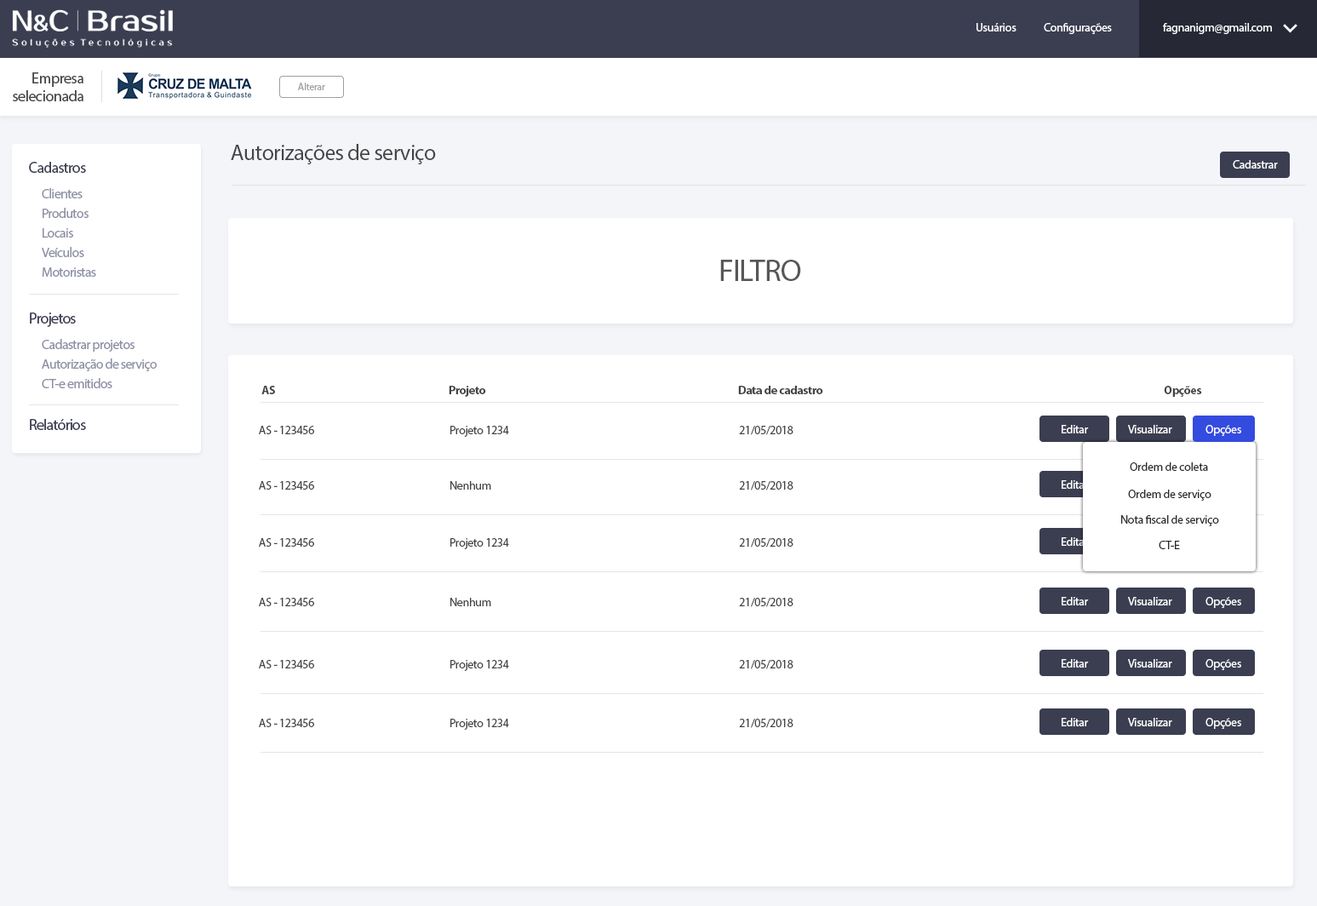
<style>
.page{position:relative;width:1317px;height:906px;background:#ffffff}
.page>*{position:absolute;margin:0}
.t1{font:11.9px "MyriadPro-Regular";letter-spacing:-0.025em;color:#ffffff}
.t2{font:15.3px/17.8px "MyriadPro-Regular";letter-spacing:-0.025em;color:#454545}
.t3{font:10.2px "MyriadPro-Regular";letter-spacing:-0.025em;color:#a2a2a2}
.t4{font:22.1px "MyriadPro-Regular";letter-spacing:-0.025em;color:#454545}
.t5{font:15.3px "MyriadPro-Regular";letter-spacing:-0.045em;color:#3b3e51}
.t6{font:13.6px "MyriadPro-Regular";letter-spacing:-0.045em;color:#8c8fa4}
.t7{font:30.6px "MyriadPro-Regular";letter-spacing:-0.025em;color:#575757}
.t8{font:13.6px "MyriadPro-Regular";letter-spacing:-0.045em;color:#8d90a5}
.t9{font:11.9px "MyriadPro-Bold";letter-spacing:-0.025em;color:#454545}
.t10{font:11.9px "MyriadPro-Regular";letter-spacing:-0.025em;color:#454545}
.t11{font:11.9px "MyriadPro-Regular";letter-spacing:-0.025em;color:#2a2a2a}
</style>
<div class="page">
<p class="t1" style="left:976px;top:23px;width:40px;height:8px">Usuários</p>
<p class="t1" style="left:1043px;top:23px;width:69px;height:11px">Configurações</p>
<p class="t1" style="left:1163px;top:23px;width:109px;height:11px">fagnanigm@gmail.com</p>
<p class="t2" style="left:13px;top:72px;width:70px;height:29px;text-align:right">Empresa<br>selecionada</p>
<p class="t3" style="left:298px;top:83px;width:27px;height:7px">Alterar</p>
<p class="t4" style="left:231px;top:144px;width:205px;height:20px">Autorizações de serviço</p>
<p class="t5" style="left:29px;top:162px;width:57px;height:11px">Cadastros</p>
<p class="t1" style="left:1232px;top:160px;width:46px;height:9px">Cadastrar</p>
<p class="t6" style="left:42px;top:188px;width:41px;height:10px">Clientes</p>
<p class="t6" style="left:43px;top:208px;width:46px;height:10px">Produtos</p>
<p class="t6" style="left:43px;top:228px;width:30px;height:9px">Locais</p>
<p class="t6" style="left:42px;top:247px;width:42px;height:10px">Veículos</p>
<p class="t6" style="left:42px;top:267px;width:54px;height:10px">Motoristas</p>
<p class="t7" style="left:720px;top:260px;width:81px;height:21px">FILTRO</p>
<p class="t5" style="left:30px;top:312px;width:46px;height:15px">Projetos</p>
<p class="t6" style="left:42px;top:339px;width:92px;height:13px">Cadastrar projetos</p>
<p class="t8" style="left:42px;top:358px;width:115px;height:13px">Autorização de serviço</p>
<p class="t6" style="left:42px;top:378px;width:70px;height:10px">CT-e emitidos</p>
<p class="t9" style="left:261px;top:386px;width:14px;height:8px">AS</p>
<p class="t9" style="left:449px;top:386px;width:37px;height:11px">Projeto</p>
<p class="t9" style="left:738px;top:386px;width:85px;height:8px">Data de cadastro</p>
<p class="t9" style="left:1164px;top:386px;width:38px;height:11px">Opções</p>
<p class="t5" style="left:30px;top:419px;width:56px;height:11px">Relatórios</p>
<p class="t10" style="left:259px;top:426px;width:55px;height:8px">AS - 123456</p>
<p class="t10" style="left:450px;top:426px;width:59px;height:11px">Projeto 1234</p>
<p class="t10" style="left:739px;top:426px;width:54px;height:9px">21/05/2018</p>
<p class="t1" style="left:1061px;top:425px;width:28px;height:8px">Editar</p>
<p class="t1" style="left:1128px;top:425px;width:44px;height:8px">Visualizar</p>
<p class="t1" style="left:1205px;top:425px;width:36px;height:11px">Opções</p>
<p class="t11" style="left:1129px;top:462px;width:79px;height:9px">Ordem de coleta</p>
<p class="t10" style="left:259px;top:481px;width:55px;height:8px">AS - 123456</p>
<p class="t10" style="left:450px;top:481px;width:41px;height:8px">Nenhum</p>
<p class="t10" style="left:739px;top:481px;width:54px;height:9px">21/05/2018</p>
<p class="t1" style="left:1061px;top:480px;width:28px;height:9px">Editar</p>
<p class="t11" style="left:1128px;top:489px;width:83px;height:11px">Ordem de serviço</p>
<p class="t11" style="left:1121px;top:515px;width:98px;height:11px">Nota fiscal de serviço</p>
<p class="t10" style="left:259px;top:538px;width:55px;height:8px">AS - 123456</p>
<p class="t10" style="left:450px;top:538px;width:59px;height:11px">Projeto 1234</p>
<p class="t10" style="left:739px;top:538px;width:54px;height:9px">21/05/2018</p>
<p class="t1" style="left:1061px;top:537px;width:28px;height:9px">Editar</p>
<p class="t11" style="left:1158px;top:540px;width:22px;height:9px">CT-E</p>
<p class="t10" style="left:259px;top:598px;width:55px;height:8px">AS - 123456</p>
<p class="t10" style="left:450px;top:598px;width:41px;height:8px">Nenhum</p>
<p class="t10" style="left:739px;top:598px;width:54px;height:9px">21/05/2018</p>
<p class="t1" style="left:1061px;top:597px;width:28px;height:8px">Editar</p>
<p class="t1" style="left:1128px;top:597px;width:44px;height:8px">Visualizar</p>
<p class="t1" style="left:1205px;top:597px;width:36px;height:11px">Opções</p>
<p class="t10" style="left:259px;top:660px;width:55px;height:8px">AS - 123456</p>
<p class="t10" style="left:450px;top:660px;width:59px;height:11px">Projeto 1234</p>
<p class="t10" style="left:739px;top:660px;width:54px;height:9px">21/05/2018</p>
<p class="t1" style="left:1061px;top:659px;width:28px;height:8px">Editar</p>
<p class="t1" style="left:1128px;top:659px;width:44px;height:8px">Visualizar</p>
<p class="t1" style="left:1205px;top:659px;width:36px;height:11px">Opções</p>
<p class="t10" style="left:259px;top:718px;width:55px;height:9px">AS - 123456</p>
<p class="t10" style="left:450px;top:718px;width:59px;height:11px">Projeto 1234</p>
<p class="t10" style="left:739px;top:718px;width:54px;height:10px">21/05/2018</p>
<p class="t1" style="left:1061px;top:718px;width:28px;height:8px">Editar</p>
<p class="t1" style="left:1128px;top:718px;width:44px;height:8px">Visualizar</p>
<p class="t1" style="left:1205px;top:718px;width:36px;height:11px">Opções</p>
</div>
